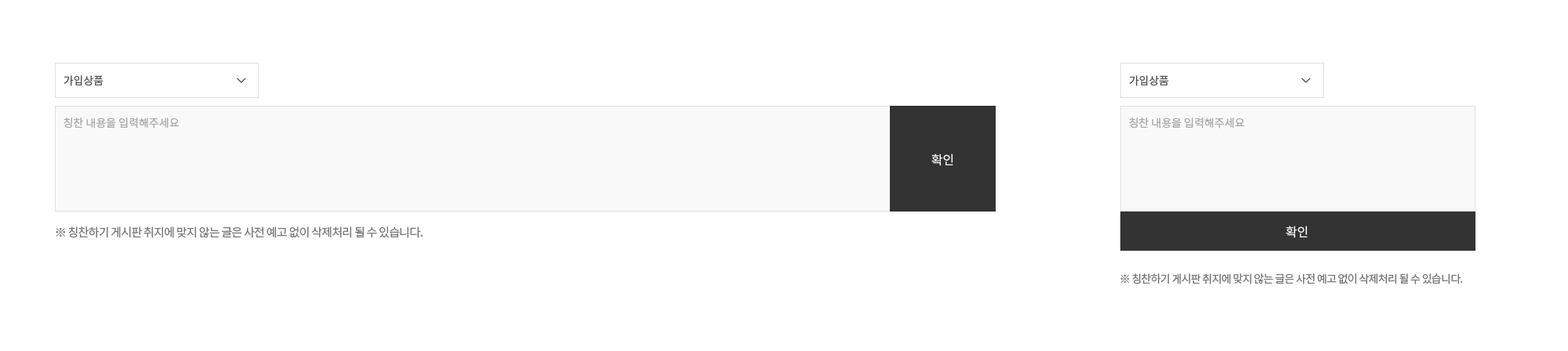
<style>
.page{position:relative;width:1568px;height:351px;background:#ffffff}
.page>*{position:absolute;margin:0}
.t1{font:11px "NotoSansKR-Regular";color:#555555}
.t2{font:11px "NotoSansKR-Regular";color:#a9a9a9}
.t3{font:12.5px "NotoSansKR-Regular";color:#ffffff}
.t4{font:11.8px "NotoSansKR-Regular";letter-spacing:-0.05em;color:#777777}
.t5{font:11px "NotoSansKR-Regular";letter-spacing:-0.05em;color:#777777}
</style>
<div class="page">
<p class="t1" style="left:64px;top:75px;width:39px;height:11px">가입상품</p>
<p class="t1" style="left:1129px;top:75px;width:40px;height:11px">가입상품</p>
<p class="t2" style="left:64px;top:118px;width:116px;height:11px">칭찬 내용을 입력해주세요</p>
<p class="t2" style="left:1129px;top:118px;width:116px;height:11px">칭찬 내용을 입력해주세요</p>
<p class="t3" style="left:931px;top:154px;width:22px;height:12px">확인</p>
<p class="t4" style="left:56px;top:227px;width:367px;height:11px">※ 칭찬하기 게시판 취지에 맞지 않는 글은 사전 예고 없이 삭제처리 될 수 있습니다.</p>
<p class="t3" style="left:1286px;top:226px;width:22px;height:12px">확인</p>
<p class="t5" style="left:1120px;top:274px;width:343px;height:11px">※ 칭찬하기 게시판 취지에 맞지 않는 글은 사전 예고 없이 삭제처리 될 수 있습니다.</p>
</div>
